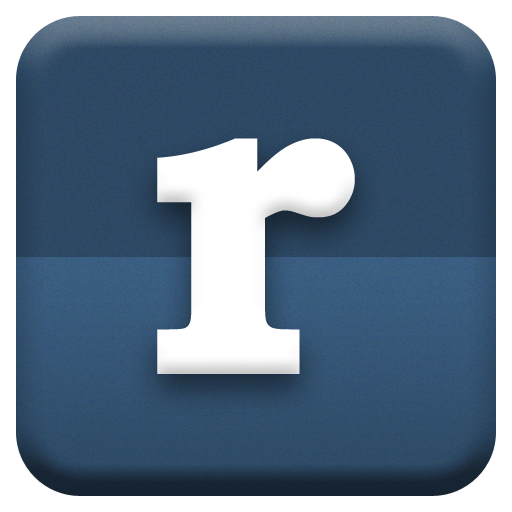
<style>
.page{position:relative;width:512px;height:512px}
.page>*{position:absolute;margin:0}
.t1{font:472px "BookmanOldStyle-Bold";color:#ffffff}
</style>
<div class="page">
<p class="t1" style="left:157px;top:138px;width:198px;height:236px">r</p>
</div>
